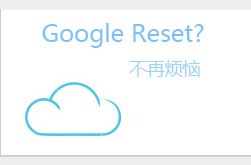
<style>
.page{position:relative;width:251px;height:165px;background:#ffffff}
.page>*{position:absolute;margin:0}
.t1{font:23.7px "MicrosoftYaHei";color:#7dc1f5}
.t2{font:17.7px "MicrosoftYaHei";color:#a0d2f8}
</style>
<div class="page">
<p class="t1" style="left:42px;top:23px;width:162px;height:25px">Google Reset?</p>
<p class="t2" style="left:129px;top:60px;width:72px;height:17px">不再烦恼</p>
</div>
